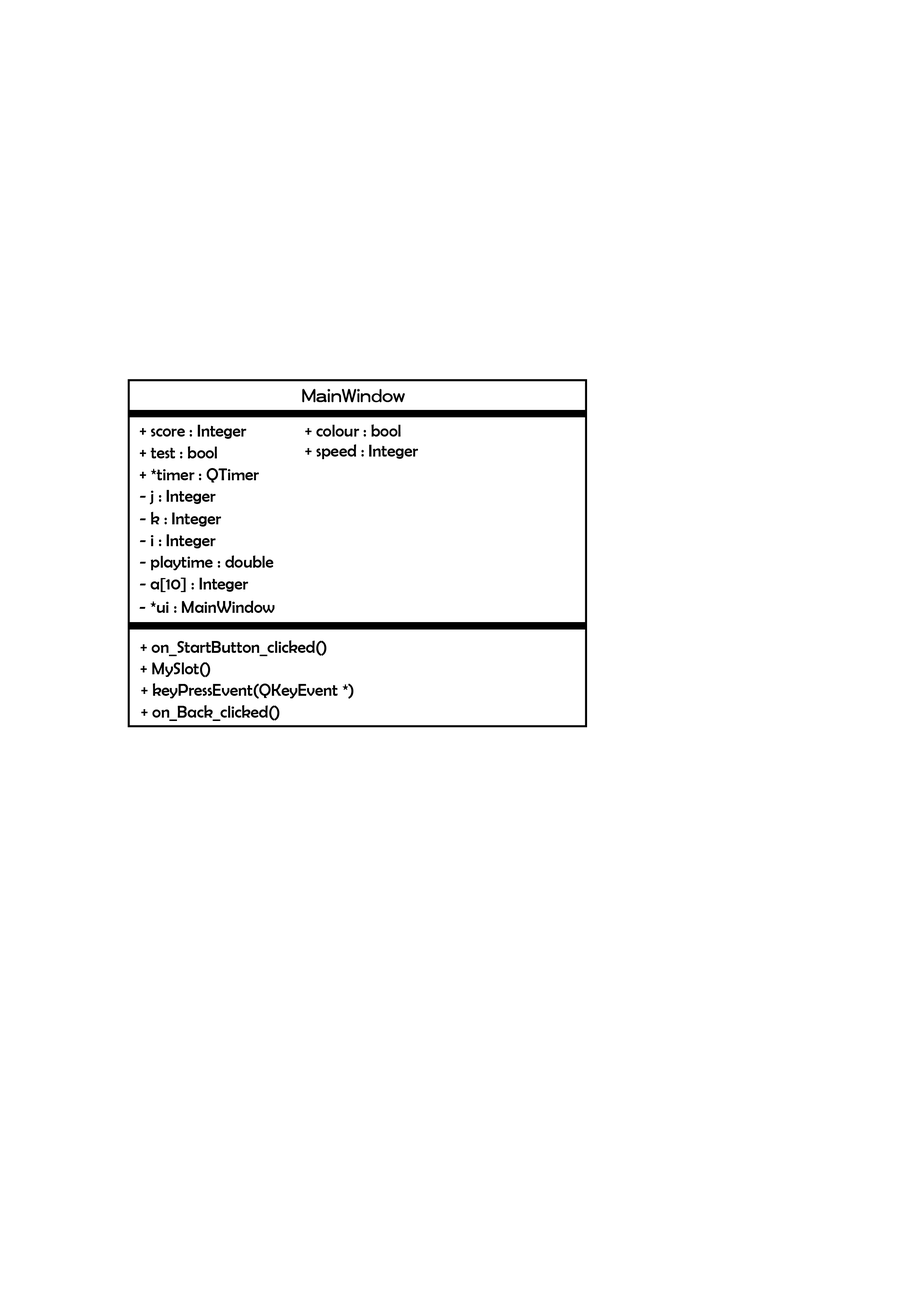
<style>
.page{position:relative;width:918px;height:1299px;background:#ffffff}
.page>*{position:absolute;margin:0}
.t1{font:17px "HanWangYenHeavy";color:#000000}
.t2{font:17px "BerlinSansFB-Reg";color:#000000}
.t3{font:17px/21.6px "BerlinSansFB-Reg";color:#000000}
</style>
<div class="page">
<p class="t1" style="left:302px;top:389px;width:103px;height:13px">MainWindow</p>
<p class="t2" style="left:140px;top:425px;width:107px;height:14px">+ score : Integer</p>
<p class="t2" style="left:305px;top:424px;width:96px;height:12px">+ colour : bool</p>
<p class="t2" style="left:140px;top:446px;width:77px;height:12px">+ test : bool</p>
<p class="t2" style="left:305px;top:444px;width:113px;height:15px">+ speed : Integer</p>
<p class="t2" style="left:140px;top:468px;width:119px;height:14px">+ *timer : QTimer</p>
<p class="t2" style="left:140px;top:490px;width:76px;height:14px">- j : Integer</p>
<p class="t2" style="left:140px;top:512px;width:81px;height:14px">- k : Integer</p>
<p class="t2" style="left:140px;top:534px;width:76px;height:14px">- i : Integer</p>
<p class="t2" style="left:140px;top:555px;width:134px;height:15px">- playtime : double</p>
<p class="t2" style="left:140px;top:578px;width:108px;height:14px">- a[10] : Integer</p>
<p class="t2" style="left:140px;top:600px;width:135px;height:13px">- *ui : MainWindow</p>
<p class="t3" style="left:140px;top:640px;width:214px;height:81px">+ on_StartButton_clicked()<br>    + MySlot()<br>  + keyPressEvent(QKeyEvent *)<br>  + on_Back_clicked()</p>
</div>
